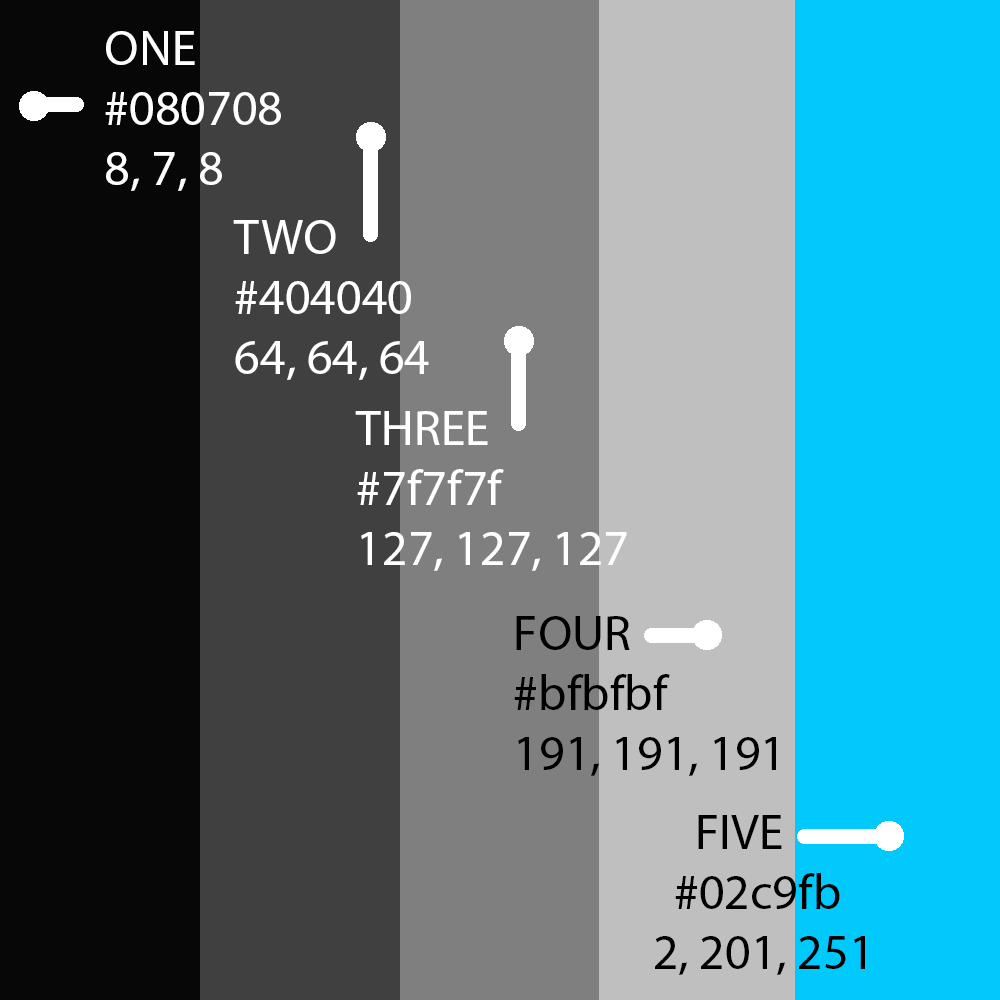
<style>
.page{position:relative;width:1000px;height:1000px}
.page>*{position:absolute;margin:0}
.t1{font:12px "MyriadPro-Regular";color:#ffffff}
.t2{font:12px "MyriadPro-Regular";color:#000000}
</style>
<div class="page">
<p class="t1" style="left:105px;top:31px;width:176px;height:160px">ONE <br>#080708<br>8, 7, 8</p>
<p class="t1" style="left:233px;top:220px;width:196px;height:160px">TWO<br>#404040<br>64, 64, 64</p>
<p class="t1" style="left:355px;top:411px;width:272px;height:160px">THREE<br>#7f7f7f<br>127, 127, 127</p>
<p class="t2" style="left:514px;top:616px;width:262px;height:160px">FOUR<br>#bfbfbf<br>191, 191, 191</p>
<p class="t2" style="left:655px;top:815px;width:210px;height:160px">FIVE<br>      #02c9fb<br>    2, 201, 251</p>
</div>
